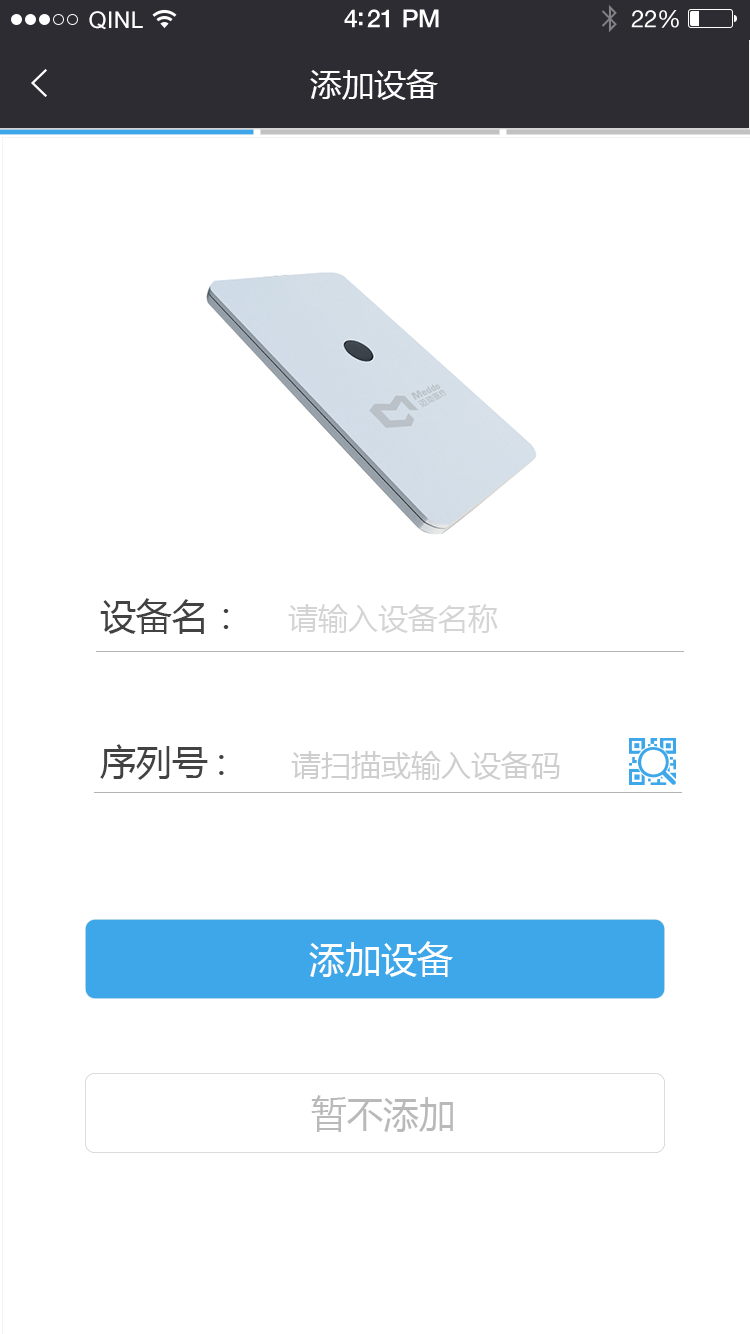
<style>
.page{position:relative;width:750px;height:1334px;background:#ffffff}
.page>*{position:absolute;margin:0}
.t1{font:23px "ArialUnicodeMS";letter-spacing:0.02em;color:#ffffff}
.t2{font:25px "HelveticaNeue-Medium";letter-spacing:-0.02em;color:#ffffff}
.t3{font:24px "HelveticaNeue";letter-spacing:-0.02em;color:#ffffff}
.t4{font:32px "MicrosoftYaHei";color:#ffffff}
.t5{font:36px "MicrosoftYaHei";color:#434343}
.t6{font:30px "MicrosoftYaHei";color:#d4d4d4}
.t7{font:30px "MicrosoftYaHei";color:#cecece}
.t8{font:36px "MicrosoftYaHei";color:#ffffff}
.t9{font:36px "MicrosoftYaHei";color:#b9b9b9}
</style>
<div class="page">
<p class="t1" style="left:89px;top:11px;width:54px;height:19px">QINL</p>
<p class="t2" style="left:344px;top:9px;width:95px;height:19px">4:21 PM</p>
<p class="t3" style="left:631px;top:10px;width:48px;height:18px">22%</p>
<p class="t4" style="left:310px;top:69px;width:128px;height:31px">添加设备</p>
<p class="t5" style="left:100px;top:598px;width:129px;height:36px">设备名：</p>
<p class="t6" style="left:288px;top:604px;width:210px;height:29px">请输入设备名称</p>
<p class="t5" style="left:100px;top:744px;width:124px;height:36px">序列号:</p>
<p class="t7" style="left:291px;top:751px;width:269px;height:29px">请扫描或输入设备码</p>
<p class="t8" style="left:309px;top:941px;width:144px;height:36px">添加设备</p>
<p class="t9" style="left:311px;top:1095px;width:142px;height:37px">暂不添加</p>
</div>
